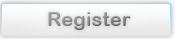
<style>
.page{position:relative;width:180px;height:39px}
.page>*{position:absolute;margin:0}
.t1{font:20.4px "ArialRoundedMTBold";color:#8a8a8a}
</style>
<div class="page">
<p class="t1" style="left:48px;top:12px;width:83px;height:18px">Register</p>
</div>
